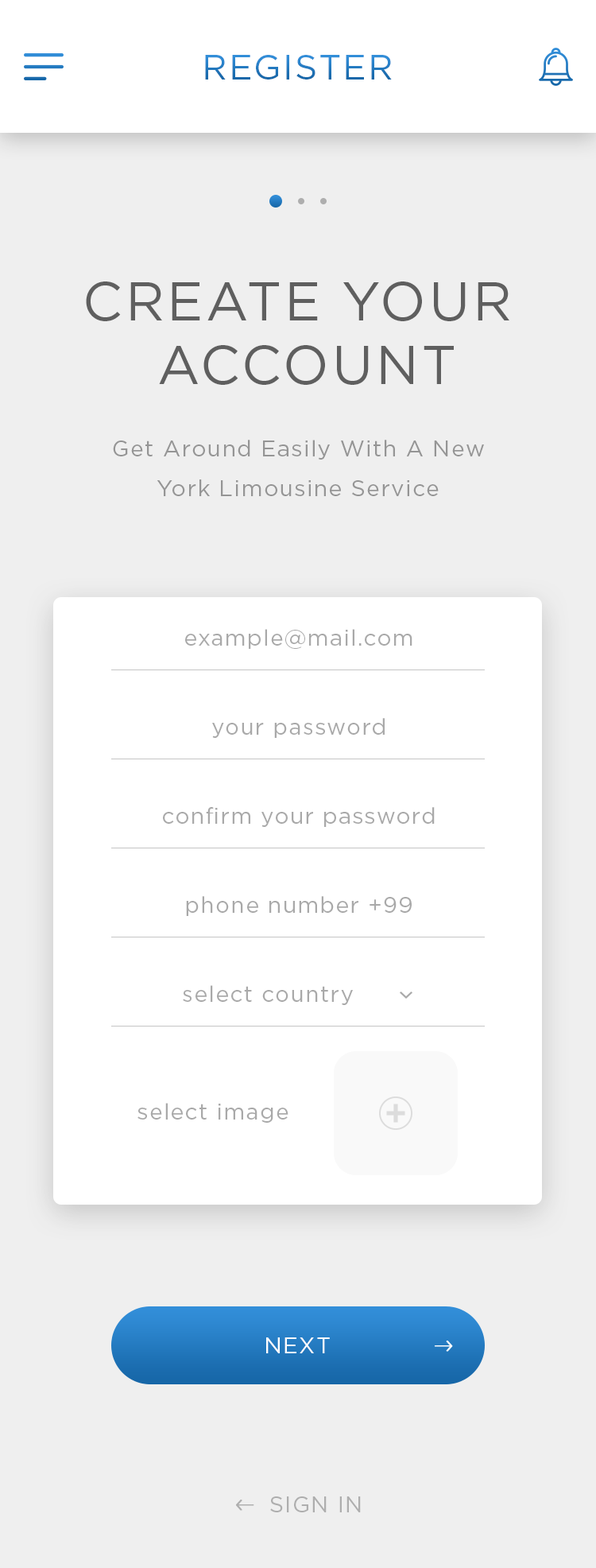
<style>
.page{position:relative;width:596px;height:1568px;background:#efefef}
.page>*{position:absolute;margin:0}
.t1{font:35px "Gotham-Book";letter-spacing:0.05em;text-transform:uppercase}
.t2{font:54.1px/63.6px "Gotham-Book";letter-spacing:0.05em;color:#5f5f5f;text-transform:uppercase}
.t3{font:22.3px/39.8px "Gotham-Book";letter-spacing:0.05em;color:#959595}
.t4{font:22.3px "Gotham-Book";letter-spacing:0.05em;color:#a9a9a9}
.t5{font:22.3px "Gotham-Book";letter-spacing:0.05em;color:#ffffff;text-transform:uppercase}
.t6{font:22.3px "Gotham-Book";letter-spacing:0.05em;color:#aeaeae;text-transform:uppercase}
</style>
<div class="page">
<p class="t1" style="left:205px;top:55px;width:187px;height:25px">REGISTER</p>
<p class="t2" style="left:86px;top:281px;width:424px;height:104px;text-align:center">create your <br>account</p>
<p class="t3" style="left:113px;top:440px;width:371px;height:56px;text-align:center">Get Around Easily With A New York Limousine Service</p>
<p class="t4" style="left:185px;top:629px;width:228px;height:20px">example@mail.com</p>
<p class="t4" style="left:212px;top:718px;width:173px;height:20px">your password</p>
<p class="t4" style="left:163px;top:807px;width:272px;height:20px">confirm your password</p>
<p class="t4" style="left:186px;top:896px;width:226px;height:20px">phone number +99</p>
<p class="t4" style="left:183px;top:985px;width:170px;height:20px">select country</p>
<p class="t4" style="left:138px;top:1103px;width:151px;height:20px">select image</p>
<p class="t5" style="left:266px;top:1337px;width:64px;height:16px">next</p>
<p class="t6" style="left:270px;top:1496px;width:91px;height:16px">sign in</p>
</div>
